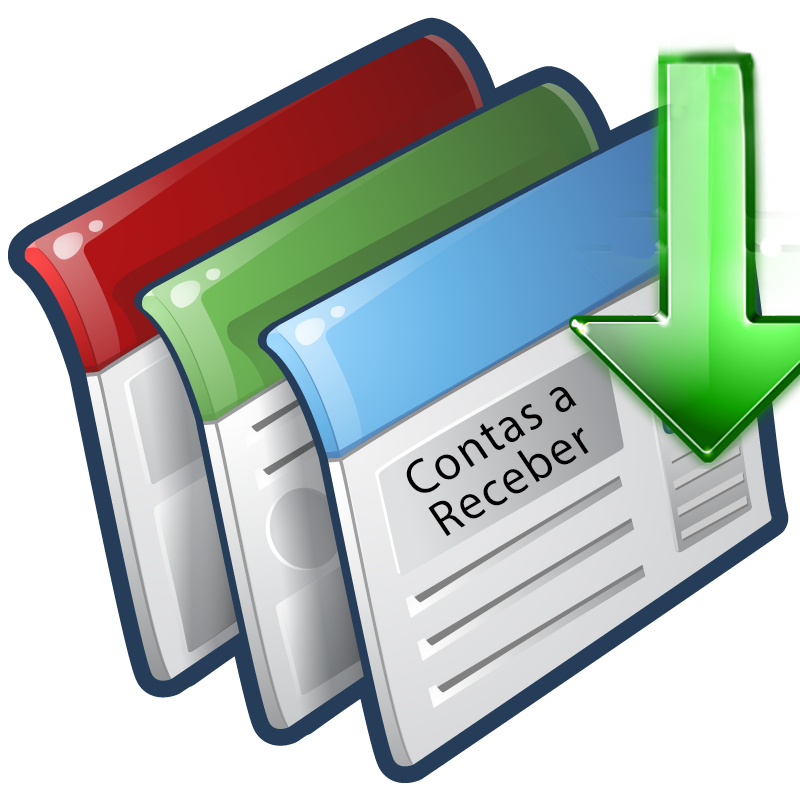
<style>
.page{position:relative;width:800px;height:800px;background:#ffffff}
.page>*{position:absolute;margin:0}
.t1{font:50.7px/47px "MyriadPro-Regular";letter-spacing:0.04em;color:#020000;scale:0.96 1}
</style>
<div class="page">
<p class="t1" style="left:406px;top:387px;width:183px;height:149px;rotate:-31deg">Contas a <br>Receber</p>
</div>
